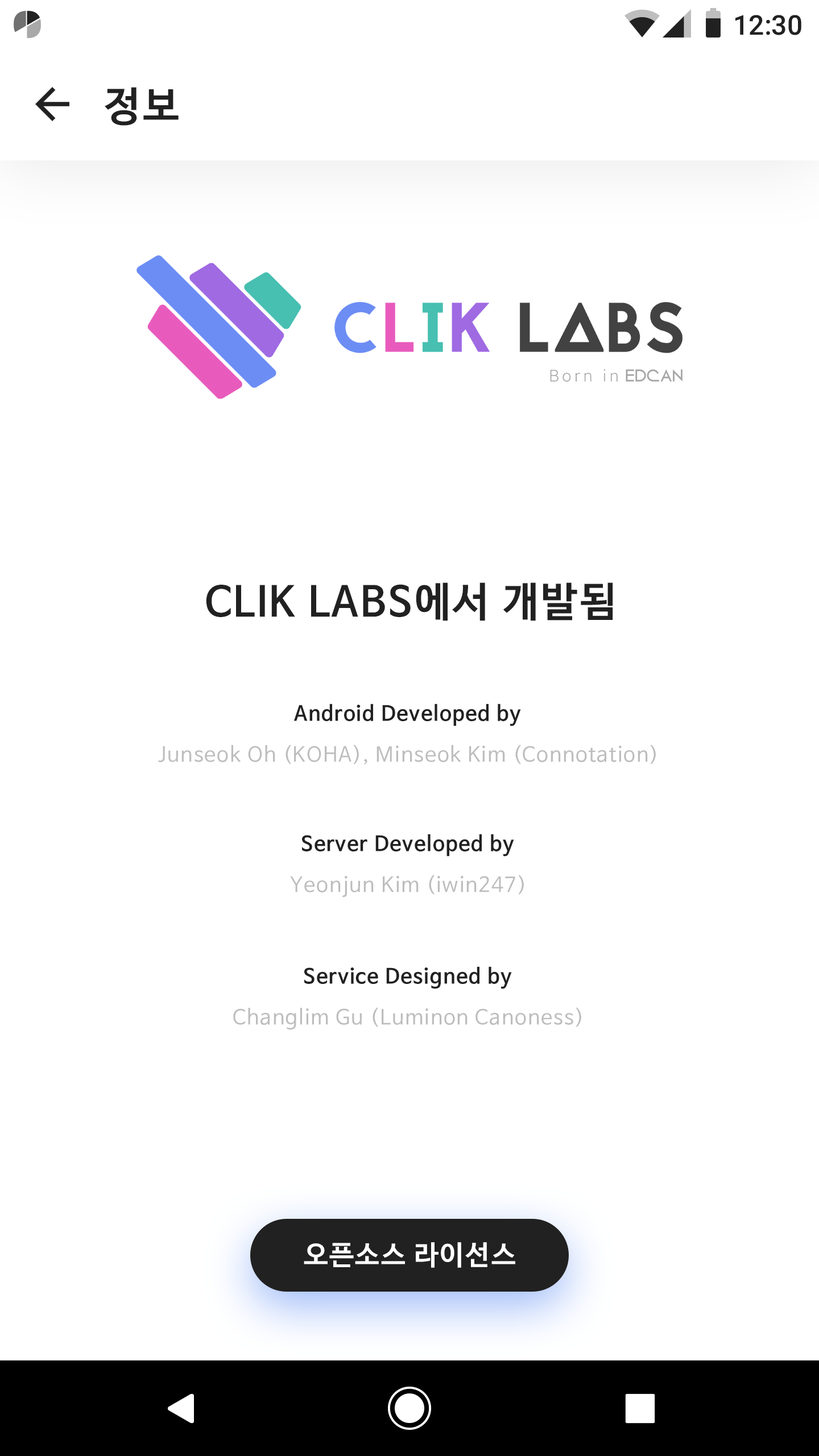
<style>
.page{position:relative;width:819px;height:1456px;background:#ffffff}
.page>*{position:absolute;margin:0}
.t1{font:27.3px "Roboto-Medium";color:#212121}
.t2{font:40.9px "NanumBarunGothicBold";letter-spacing:0.05em;color:#212121}
.t3{font:20.5px "NanumBarunGothicBold";letter-spacing:0.05em;color:#212121}
.t4{font:20.5px "NanumBarunGothic";letter-spacing:0.05em;color:#bdbdbd}
.t5{font:27.3px "NanumBarunGothicBold";letter-spacing:0.05em;color:#ffffff}
</style>
<div class="page">
<p class="t1" style="left:735px;top:15px;width:66px;height:20px">12:30</p>
<p class="t2" style="left:105px;top:87px;width:74px;height:39px">정보</p>
<p class="t2" style="left:206px;top:582px;width:407px;height:39px">CLIK LABS에서 개발됨</p>
<p class="t3" style="left:293px;top:704px;width:228px;height:22px">Android Developed by</p>
<p class="t4" style="left:158px;top:744px;width:498px;height:20px">Junseok Oh (KOHA), Minseok Kim (Connotation)</p>
<p class="t3" style="left:302px;top:834px;width:212px;height:23px">Server Developed by</p>
<p class="t4" style="left:290px;top:875px;width:234px;height:22px">Yeonjun Kim (iwin247)</p>
<p class="t3" style="left:304px;top:966px;width:208px;height:23px">Service Designed by</p>
<p class="t4" style="left:233px;top:1007px;width:348px;height:23px">Changlim Gu (Luminon Canoness)</p>
<p class="t5" style="left:304px;top:1242px;width:211px;height:26px">오픈소스 라이선스</p>
</div>
